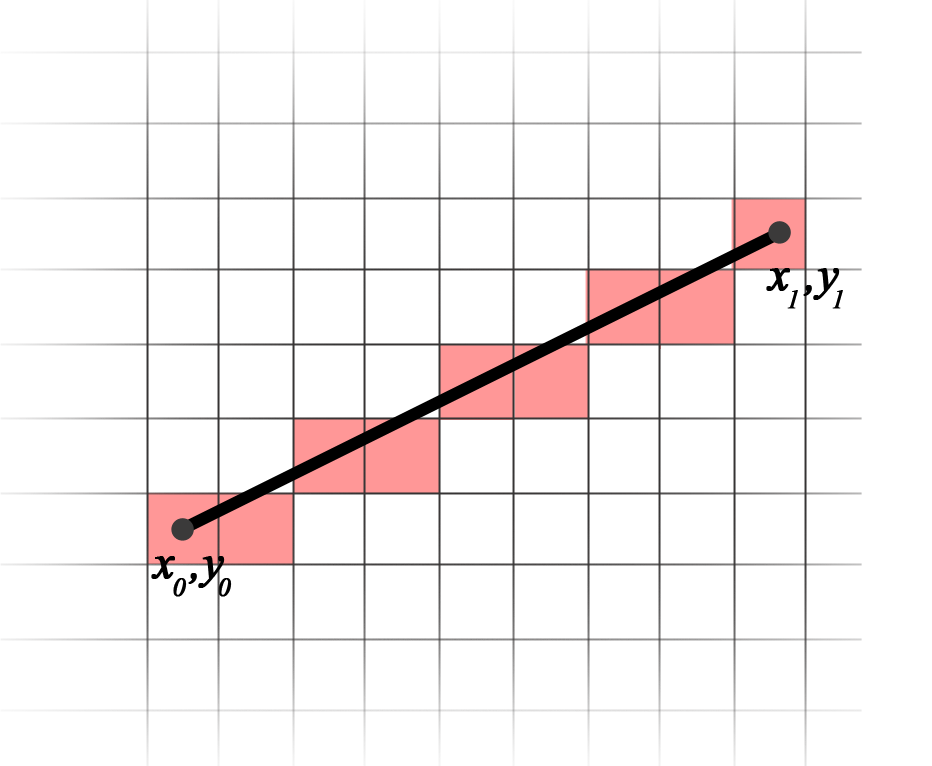
<style>
.page{position:relative;width:932px;height:766px;background:#ffffff}
.page>*{position:absolute;margin:0}
.t1{font:58.3px "Vijaya";color:#000000;font-weight:bold}
.t2{font:33.3px "Vijaya";color:#000000;font-weight:bold}
</style>
<div class="page">
<p class="t1" style="left:766px;top:268px;width:74px;height:32px">x ,y</p>
<p class="t2" style="left:787px;top:290px;width:56px;height:19px">1    1</p>
<p class="t1" style="left:151px;top:556px;width:74px;height:32px">x ,y</p>
<p class="t2" style="left:173px;top:578px;width:59px;height:19px">0    0</p>
</div>
